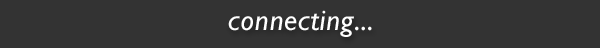
<style>
.page{position:relative;width:600px;height:48px;background:#333333}
.page>*{position:absolute;margin:0}
.t1{font:30px "GillSansMT-Italic";letter-spacing:0.025em;color:#ffffff}
</style>
<div class="page">
<p class="t1" style="left:228px;top:10px;width:144px;height:27px">connecting...</p>
</div>
